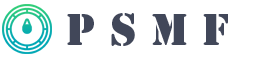
<style>
.page{position:relative;width:270px;height:58px;background:#ffffff}
.page>*{position:absolute;margin:0}
.t1{font:42px "StencilStd";color:#414759}
</style>
<div class="page">
<p class="t1" style="left:67px;top:13px;width:161px;height:33px">P S M F</p>
</div>
